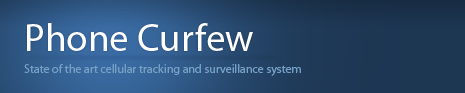
<style>
.page{position:relative;width:465px;height:93px}
.page>*{position:absolute;margin:0}
.t1{font:39px "MyriadPro-Regular";color:#ffffff}
.t2{font:12px "MyriadPro-Regular";color:#759fc4}
</style>
<div class="page">
<p class="t1" style="left:27px;top:23px;width:226px;height:28px">Phone Curfew</p>
<p class="t2" style="left:24px;top:64px;width:277px;height:12px">State of the art cellular tracking and surveillance system</p>
</div>
